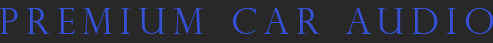
<style>
.page{position:relative;width:493px;height:43px;background:#282828}
.page>*{position:absolute;margin:0}
.t1{font:36px "PerpetuaTitlingMT-Light";letter-spacing:0.2em;color:#3751d3}
</style>
<div class="page">
<p class="t1" style="left:0px;top:8px;width:494px;height:26px">Premium Car Audio</p>
</div>
